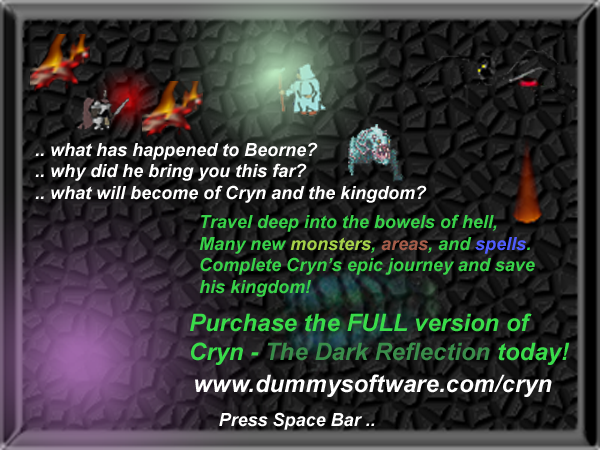
<style>
.page{position:relative;width:600px;height:450px}
.page>*{position:absolute;margin:0}
.t1{font:18px "Arial-BoldItalicMT";color:#ffffff}
.t2{font:18px "Arial-BoldItalicMT";color:#38d249}
.t3{font:18px "Arial-BoldItalicMT";color:#a5d249}
.t4{font:18px "Arial-BoldItalicMT";color:#a55c49}
.t5{font:18px "Arial-BoldItalicMT";color:#4f5cff}
.t6{font:24px "Arial-BoldItalicMT";color:#39dc4a}
.t7{font:24px "Arial-BoldItalicMT";color:#398d4a}
.t8{font:24px "Arial-BoldItalicMT";color:#ffffff}
</style>
<div class="page">
<p class="t1" style="left:35px;top:142px;width:392px;height:61px">.. what has happened to Beorne?<br>.. why did he bring you this far?<br>.. what will become of Cryn and the kingdom?</p>
<p class="t2" style="left:199px;top:214px;width:336px;height:83px">Travel deep into the bowels of hell,<br>Many new <span class="t3">monsters</span>, <span class="t4">areas</span>, and <span class="t5">spells</span>.<br>Complete Cryn’s epic journey and save<br>his kingdom!</p>
<p class="t6" style="left:190px;top:313px;width:380px;height:52px">Purchase the FULL version of<br>Cryn - <span class="t7">The Dark Reflection</span> today!</p>
<p class="t8" style="left:195px;top:374px;width:357px;height:23px">www.dummysoftware.com/cryn</p>
<p class="t1" style="left:219px;top:412px;width:156px;height:18px">Press Space Bar ..</p>
</div>
